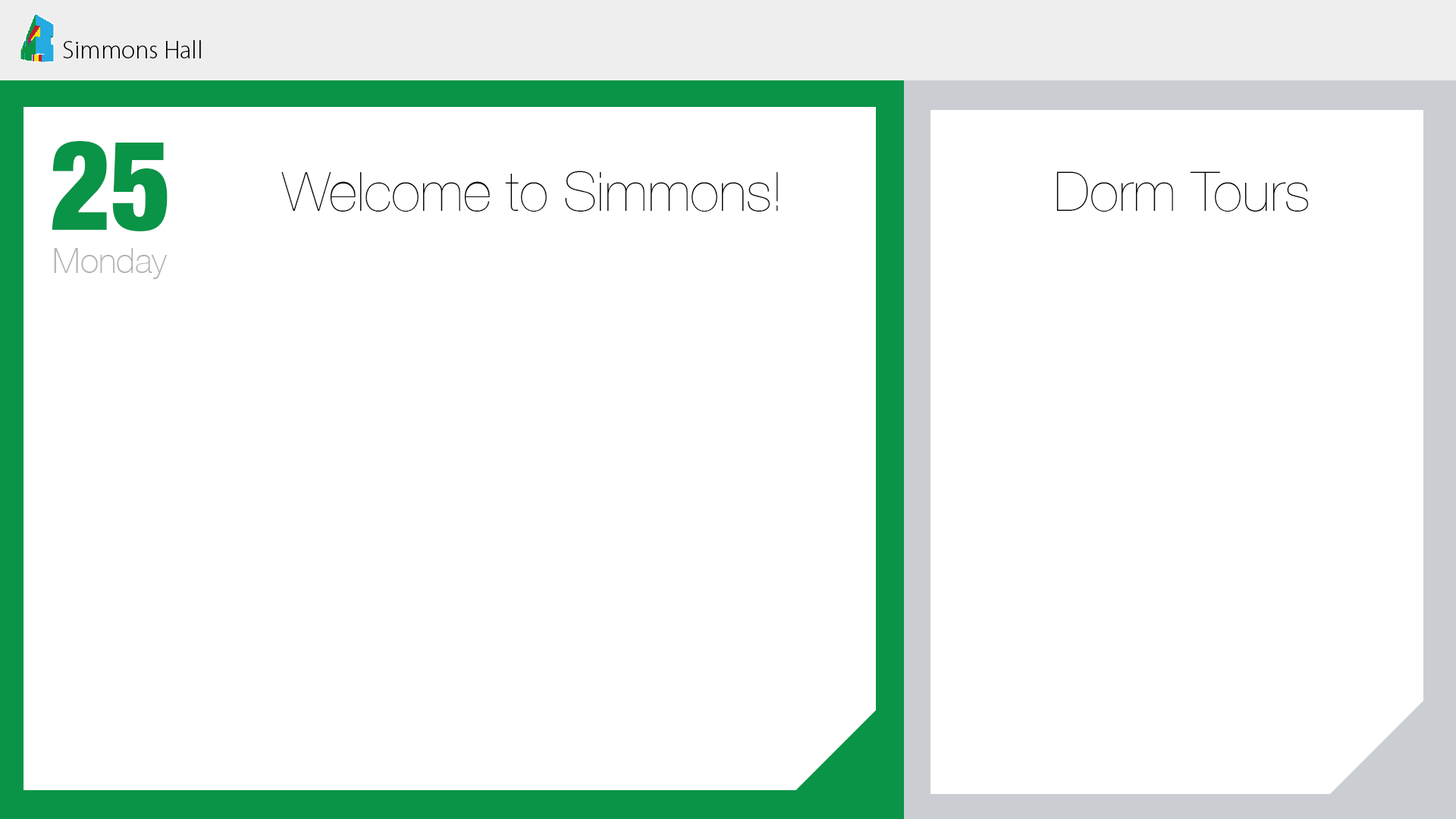
<style>
.page{position:relative;width:1456px;height:819px;background:#ffffff}
.page>*{position:absolute;margin:0}
.t1{font:25.4px "MyriadPro-Light";color:#000000}
.t2{font:125.8px "HelveticaNeue-CondensedBlack";color:#099447;scale:0.93 1}
.t3{font:55px "HelveticaNeue-UltraLight";color:#000000}
.t4{font:35px "HelveticaNeue-Thin";color:#b2b4b8}
</style>
<div class="page">
<p class="t1" style="left:63px;top:40px;width:138px;height:18px">Simmons Hall</p>
<p class="t2" style="left:52px;top:141px;width:116px;height:90px">25</p>
<p class="t3" style="left:281px;top:171px;width:497px;height:41px">Welcome to Simmons!</p>
<p class="t3" style="left:1056px;top:171px;width:252px;height:41px">Dorm Tours</p>
<p class="t4" style="left:54px;top:248px;width:114px;height:31px">Monday</p>
</div>
